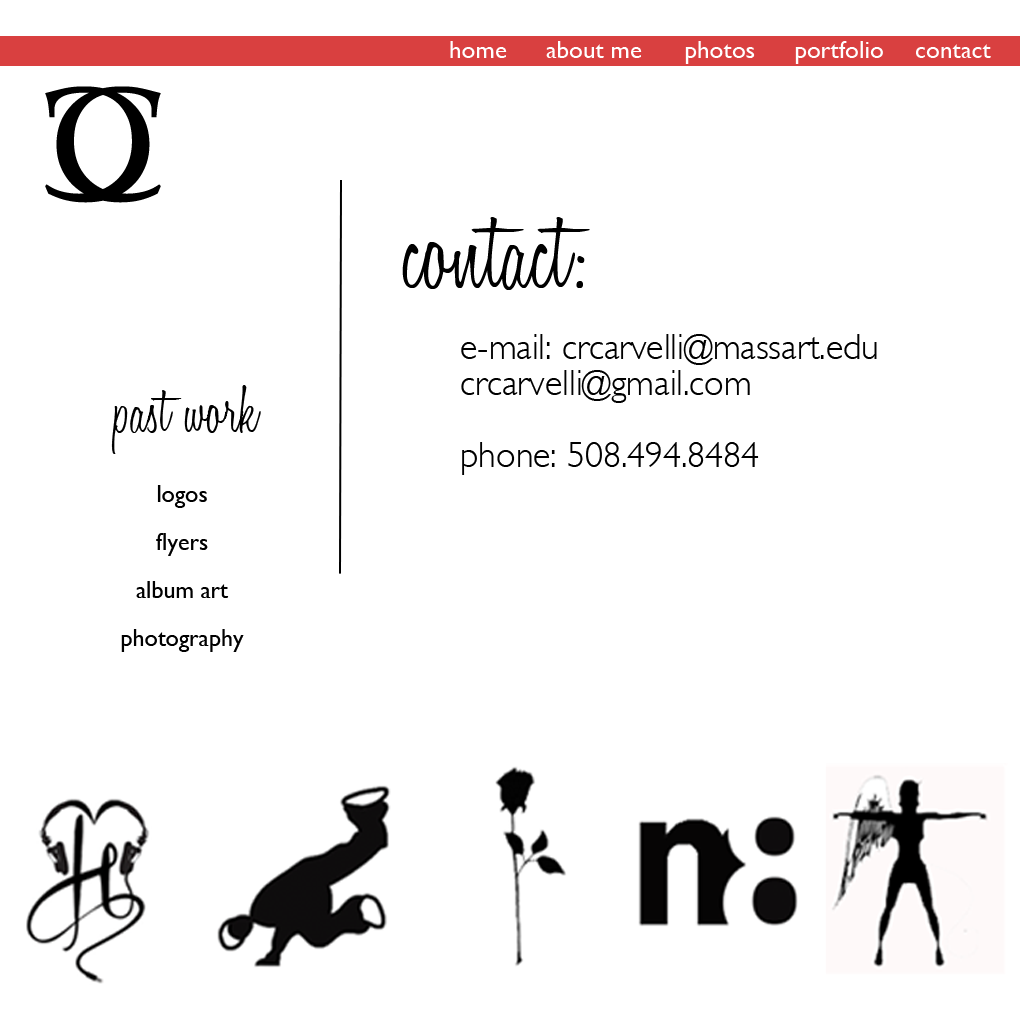
<style>
.page{position:relative;width:1020px;height:1020px;background:#ffffff}
.page>*{position:absolute;margin:0}
.t1{font:25px "GillSans";color:#ffffff}
.t2{font:120px "HoneyScript-Light";color:#000000}
.t3{font:36px/36px "GillSans-Light";color:#000000}
.t4{font:70px "HoneyScript-Light";color:#000000}
.t5{font:24px/48px "GillSans";color:#000000}
</style>
<div class="page">
<p class="t1" style="left:450px;top:41px;width:57px;height:17px">home</p>
<p class="t1" style="left:546px;top:41px;width:96px;height:17px">about me</p>
<p class="t1" style="left:685px;top:41px;width:70px;height:23px">photos</p>
<p class="t1" style="left:795px;top:41px;width:88px;height:23px">portfolio</p>
<p class="t1" style="left:916px;top:44px;width:75px;height:14px">contact</p>
<p class="t2" style="left:402px;top:217px;width:188px;height:73px">contact:</p>
<p class="t3" style="left:461px;top:334px;width:416px;height:141px">e-mail: crcarvelli@massart.edu<br>crcarvelli@gmail.com<br><br>phone: 508.494.8484</p>
<p class="t4" style="left:111px;top:385px;width:150px;height:69px">past work</p>
<p class="t5" style="left:121px;top:485px;width:123px;height:167px;text-align:center">logos<br>flyers<br>album art<br>photography</p>
</div>
